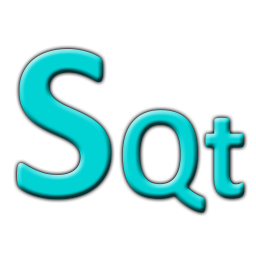
<style>
.page{position:relative;width:256px;height:256px;background:#ffffff}
.page>*{position:absolute;margin:0}
.t1{font:228.5px "Calibri-Bold";color:#01d3d5}
.t2{font:135px "Calibri-Bold";scale:0.93 1}
</style>
<div class="page">
<p class="t1" style="left:17px;top:49px;width:95px;height:150px">S</p>
<p class="t2" style="left:122px;top:110px;width:122px;height:103px">Qt</p>
</div>
